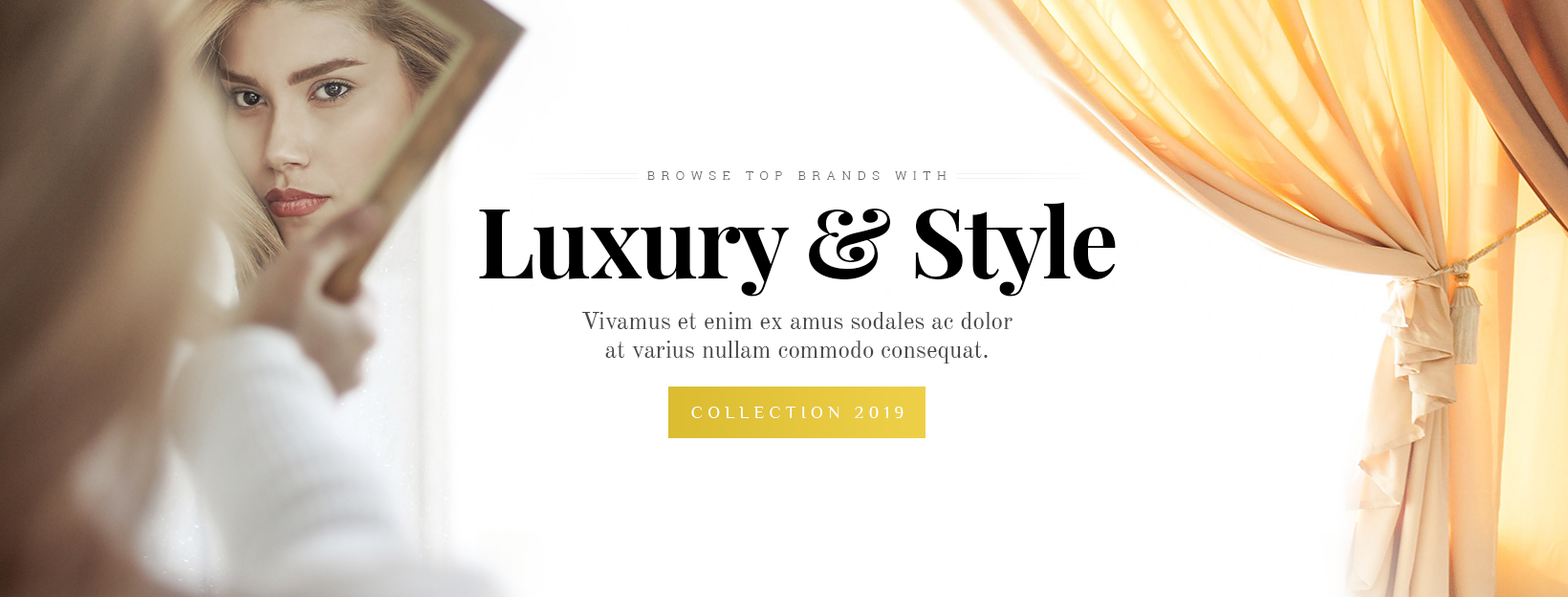
<style>
.page{position:relative;width:1568px;height:597px;background:#ffffff}
.page>*{position:absolute;margin:0}
.t1{font:12.4px "RobotoSlab-Light";letter-spacing:0.5em;color:#696969;text-transform:uppercase}
.t2{font:96.6px "PlayfairDisplay-Bold";letter-spacing:-0.02em;color:#000000}
.t3{font:23.9px/28.7px "OldStandardTT-Regular";color:#474747}
.t4{font:17.2px "Philosopher-Regular";letter-spacing:0.3em;color:#ffffff;text-transform:uppercase}
</style>
<div class="page">
<p class="t1" style="left:647px;top:171px;width:300px;height:9px">browse top brands with</p>
<p class="t2" style="left:479px;top:202px;width:637px;height:94px">Luxury &amp; Style</p>
<p class="t3" style="left:582px;top:312px;width:431px;height:51px;text-align:center">Vivamus et enim ex amus sodales ac dolor<br>at varius nullam commodo consequat.</p>
<p class="t4" style="left:691px;top:406px;width:213px;height:12px">collection 2019</p>
</div>
